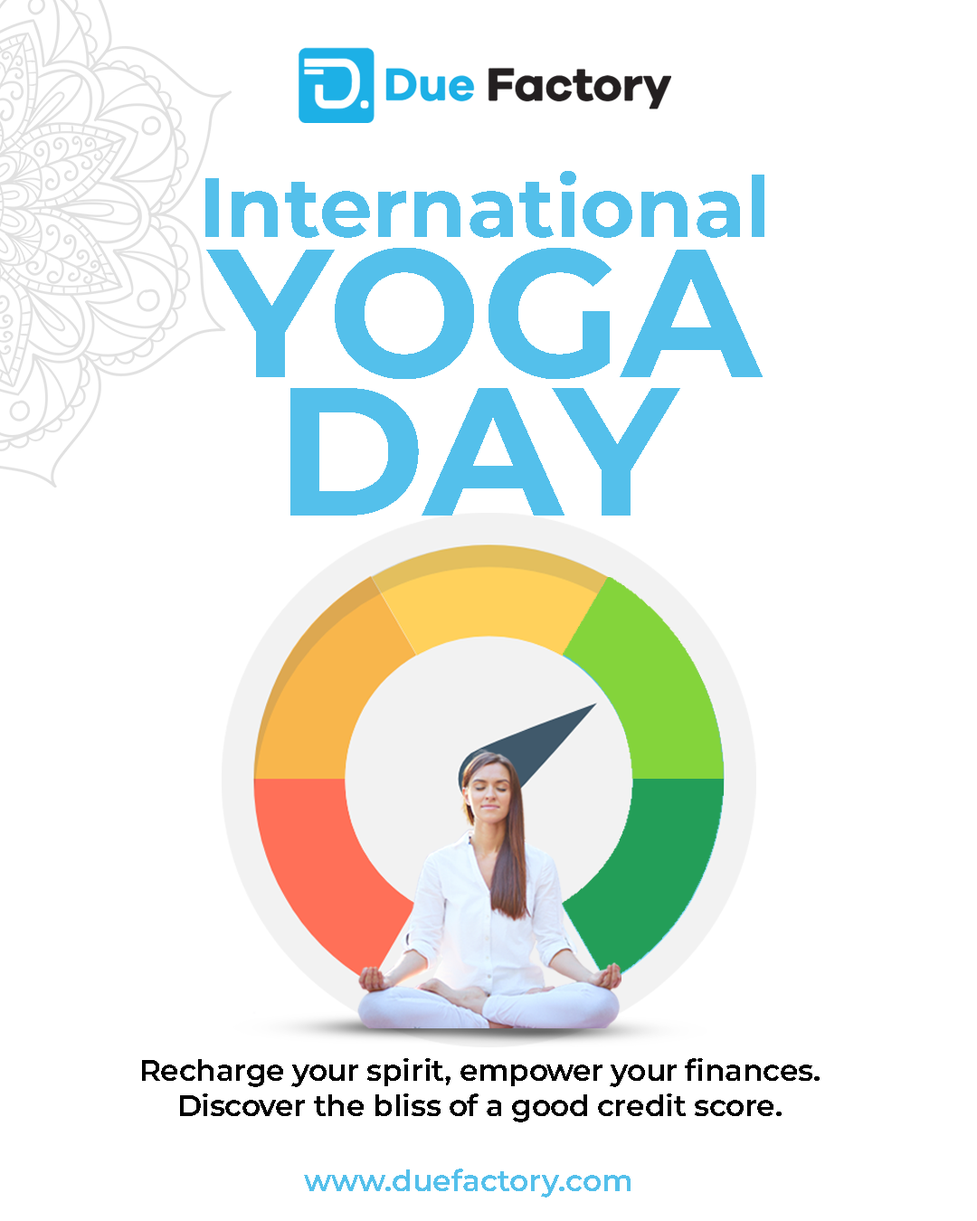
<style>
.page{position:relative;width:977px;height:1221px;background:#ffffff}
.page>*{position:absolute;margin:0}
.t1{font:84.3px "Montserrat-Bold";color:#54c0eb}
.t2{font:182.2px "Montserrat-Bold";color:#54c0eb}
.t3{font:29.4px "Montserrat-SemiBold";color:#000000}
.t4{font:30.2px "Montserrat-SemiBold";color:#54c0eb}
</style>
<div class="page">
<p class="t1" style="left:205px;top:171px;width:559px;height:67px">International</p>
<p class="t2" style="left:206px;top:248px;width:556px;height:131px">YOGA</p>
<p class="t2" style="left:290px;top:388px;width:390px;height:127px">DAY</p>
<p class="t3" style="left:142px;top:1058px;width:677px;height:64px;text-align:center">Recharge your spirit, empower your finances. <br>Discover the bliss of a good credit score.</p>
<p class="t4" style="left:304px;top:1168px;width:326px;height:29px">www.duefactory.com</p>
</div>
